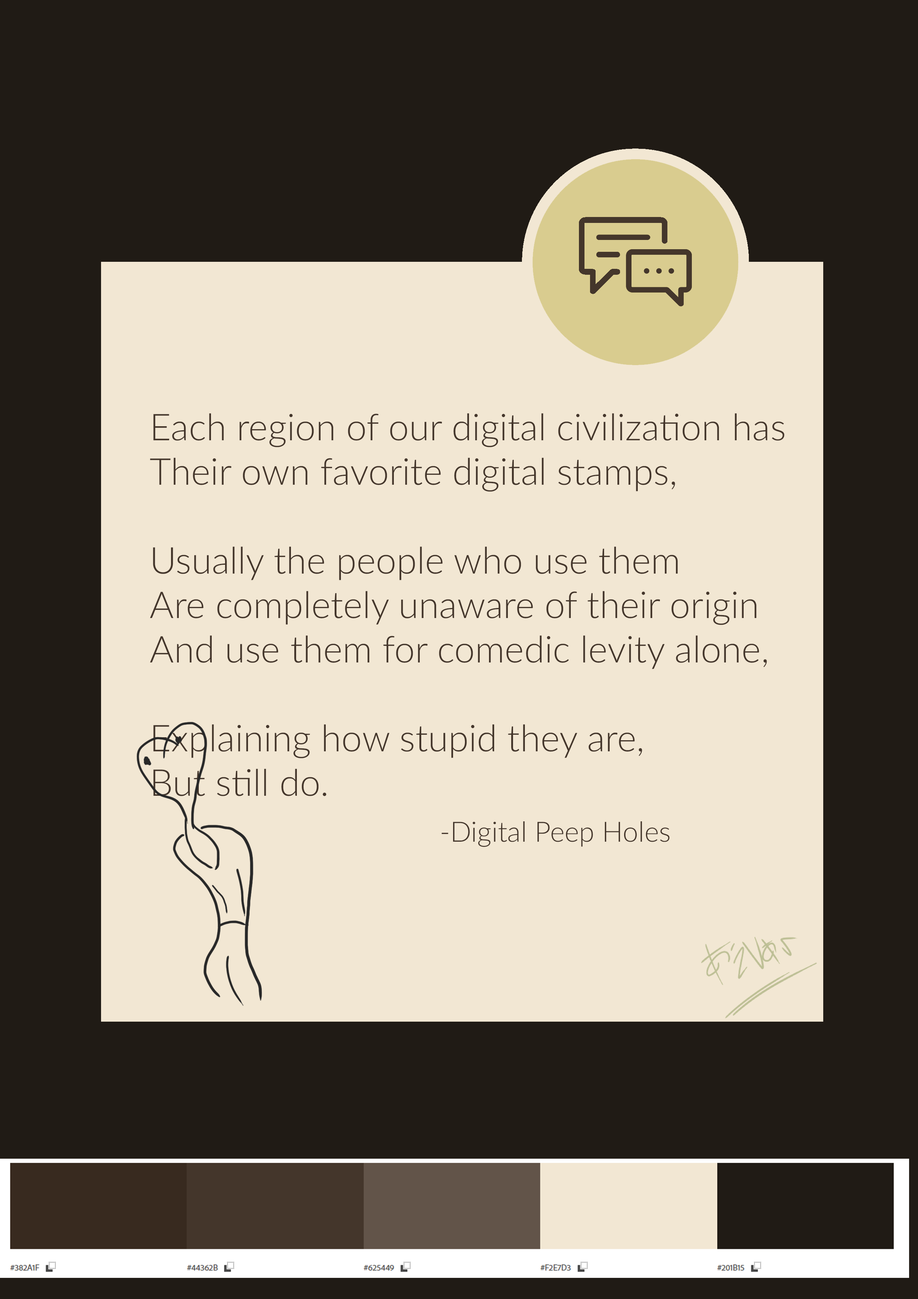
<style>
.page{position:relative;width:918px;height:1299px;background:#201b15}
.page>*{position:absolute;margin:0}
.t1{font:37px "Lato-Light";color:#44362b}
.t2{font:27.9px "Lato-Light";color:#44362b}
</style>
<div class="page">
<p class="t1" style="left:150px;top:413px;width:634px;height:383px">Each region of our digital civilization has <br>Their own favorite digital stamps, <br><br>Usually the people who use them <br>Are completely unaware of their origin <br>And use them for comedic levity alone, <br><br>Explaining how stupid they are,<br>But still do.</p>
<p class="t2" style="left:442px;top:821px;width:228px;height:26px">-Digital Peep Holes</p>
</div>
